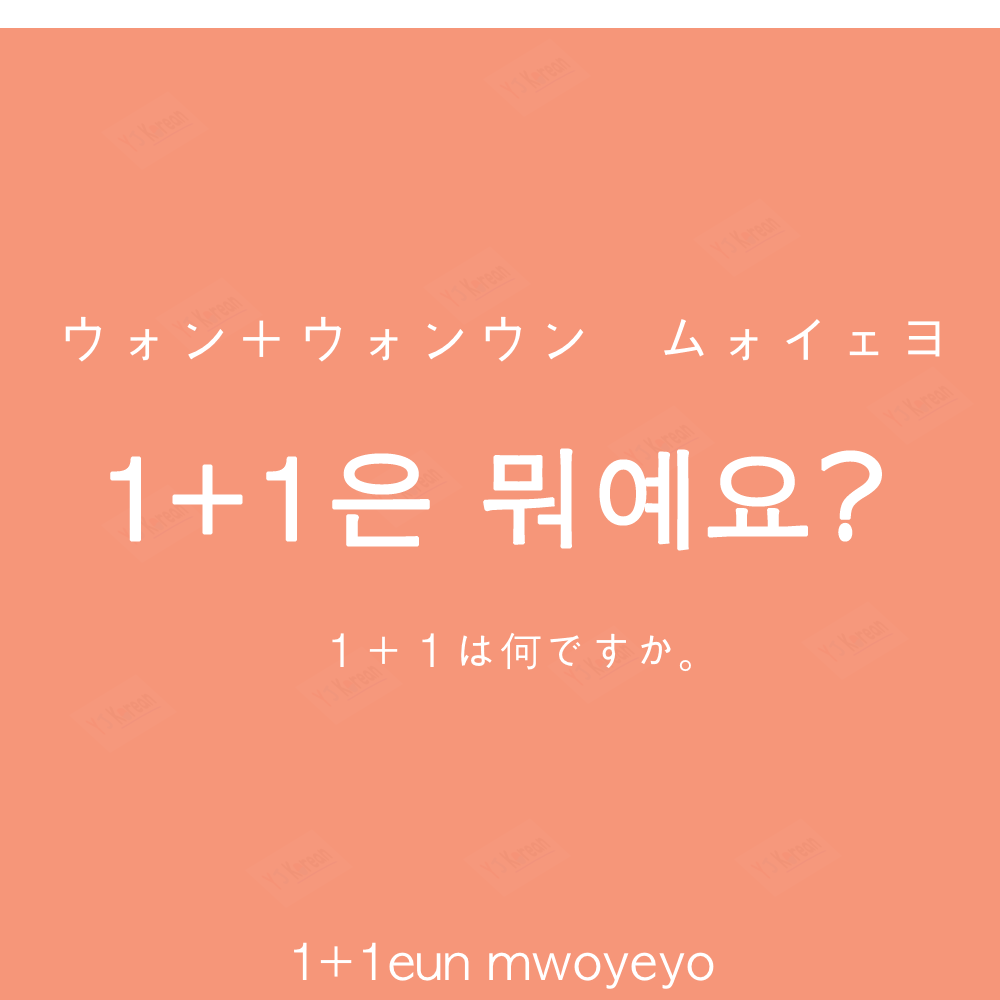
<style>
.page{position:relative;width:1000px;height:1000px;background:#f69679}
.page>*{position:absolute;margin:0}
.t1{font:60px "AppleGothic";color:#ffffff}
.t2{font:110px "AppleGothic";color:#ffffff;font-weight:bold}
.t3{font:45px "AppleGothic";color:#ffffff}
.t4{font:50px "AppleGothic";color:#ffffff}
</style>
<div class="page">
<p class="t1" style="left:65px;top:316px;width:875px;height:46px">ウォン＋ウォンウン　ムォイェヨ</p>
<p class="t2" style="left:110px;top:448px;width:772px;height:103px">1+1은 뭐예요?</p>
<p class="t3" style="left:332px;top:632px;width:359px;height:40px">１＋１は何ですか。</p>
<p class="t4" style="left:294px;top:942px;width:420px;height:47px">1+1eun mwoyeyo</p>
</div>
